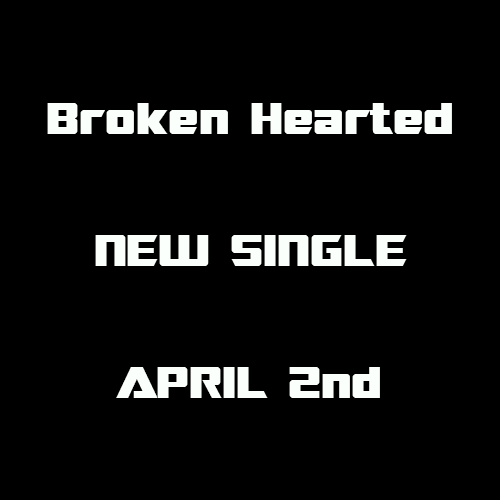
<style>
.page{position:relative;width:500px;height:500px;background:#000000}
.page>*{position:absolute;margin:0}
.t1{font:52.4px/132px "SFTransRobotics";color:#fafffb;scale:1.12 1}
</style>
<div class="page">
<p class="t1" style="left:47px;top:103px;width:405px;height:295px;text-align:center">Broken Hearted<br>NEW SINGLE<br>APRIL 2nd</p>
</div>
